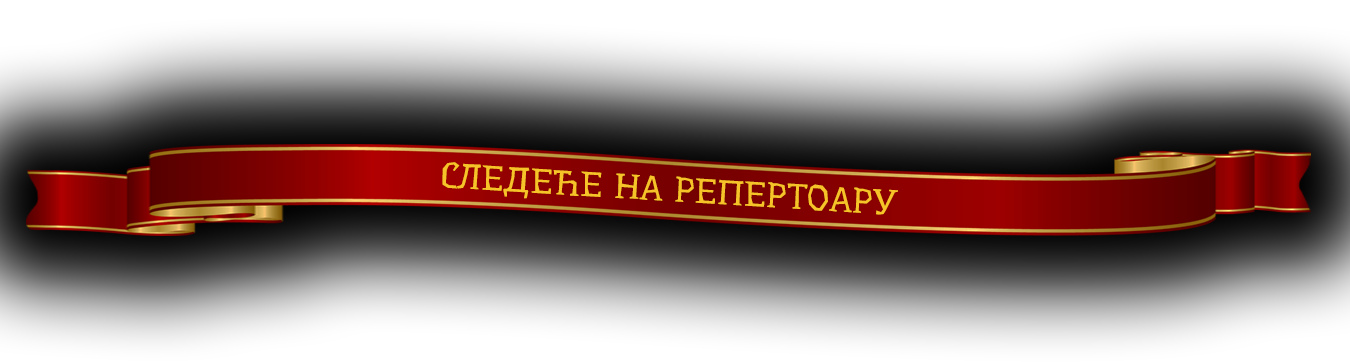
<style>
.page{position:relative;width:1350px;height:363px}
.page>*{position:absolute;margin:0}
.t1{font:34.1px "Underdog-Regular";color:#f6c429;scale:1.08 1}
</style>
<div class="page">
<p class="t1" style="left:442px;top:162px;width:456px;height:53px;rotate:4deg">СЛЕДЕЋЕ НА РЕПЕРТОАРУ</p>
</div>
